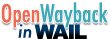
<style>
.page{position:relative;width:110px;height:39px;background:#ffffff}
.page>*{position:absolute;margin:0}
.t1{font:24px "Futura-CondensedMedium";color:#3daab8}
.t2{font:24px "Futura-CondensedMedium";color:#ee6a50}
.t3{font:18px "Futura-MediumItalic";color:#003768}
.t4{font:20px "Arial-Black";letter-spacing:-0.1em}
.t5{font:20px "Arial-Black";letter-spacing:-0.04em}
.t6{font:20px "Arial-Black";letter-spacing:-0.08em}
.t7{font:20px "Arial-Black";letter-spacing:-0.02em}
</style>
<div class="page">
<p class="t1" style="left:1px;top:2px;width:107px;height:26px"><span class="t2">Open</span>Wayback</p>
<p class="t3" style="left:18px;top:24px;width:14px;height:14px">in</p>
<p class="t4" style="left:34px;top:24px;width:53px;height:15px">W<span class="t5">A</span><span class="t6">I</span><span class="t7">L</span></p>
</div>
